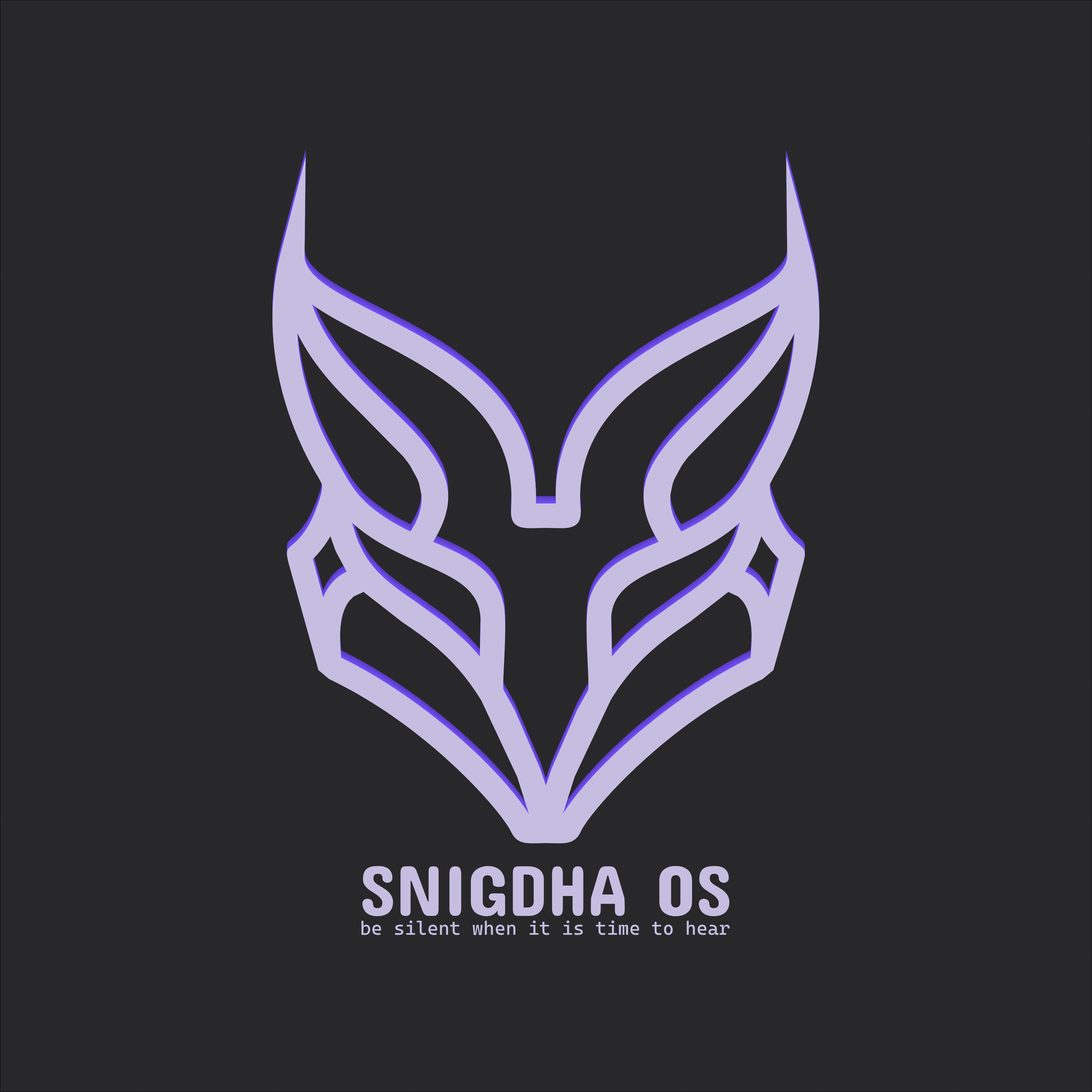
<style>
.page{position:relative;width:1092px;height:1092px;background:#28282b}
.page>*{position:absolute;margin:0}
.t1{font:72.6px "ConcertOne-Regular";color:#c6bee1}
.t2{font:19.1px "CascadiaCode";color:#c6bee1}
</style>
<div class="page">
<p class="t1" style="left:362px;top:866px;width:367px;height:50px">SNIGDHA OS</p>
<p class="t2" style="left:361px;top:920px;width:369px;height:15px">be silent when it is time to hear</p>
</div>
